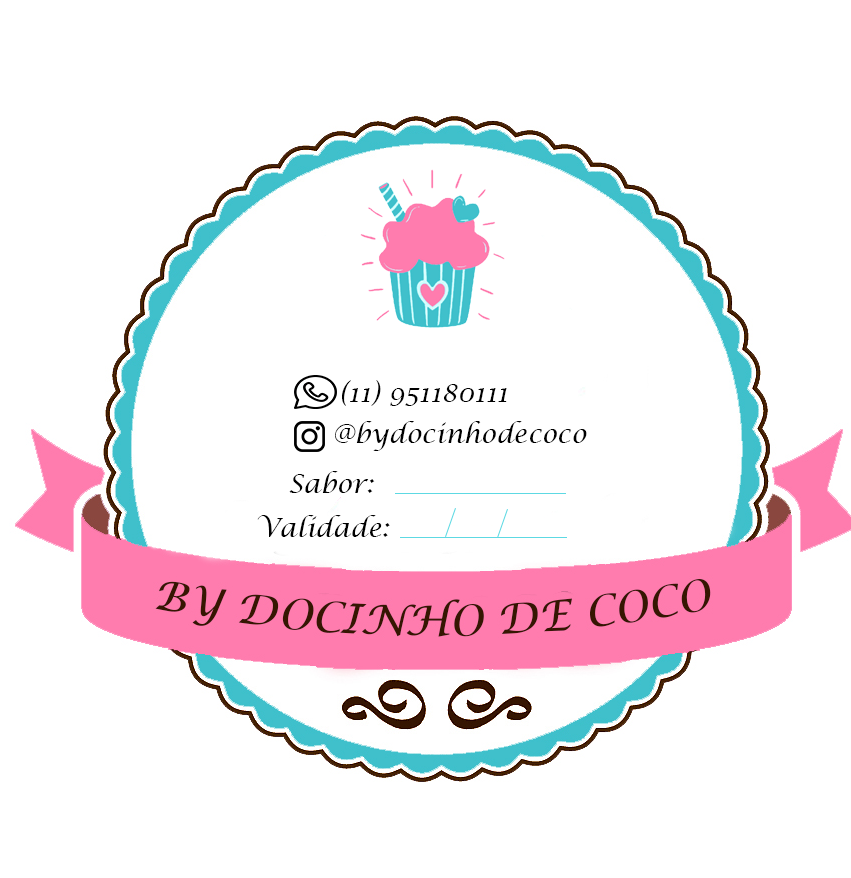
<style>
.page{position:relative;width:851px;height:878px;background:#ffffff}
.page>*{position:absolute;margin:0}
.t1{font:26px "LucidaCalligraphy-Italic";color:#000000}
</style>
<div class="page">
<p class="t1" style="left:342px;top:380px;width:165px;height:26px">(11) 951180111</p>
<p class="t1" style="left:335px;top:421px;width:252px;height:30px">@bydocinhodecoco</p>
<p class="t1" style="left:289px;top:471px;width:86px;height:22px">Sabor:</p>
<p class="t1" style="left:257px;top:515px;width:133px;height:22px">Validade:</p>
</div>
